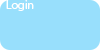
<style>
.page{position:relative;width:100px;height:50px;background:#98dffc}
.page>*{position:absolute;margin:0}
.t1{font:12px "MyriadPro-Regular";color:#ffffff}
</style>
<div class="page">
<p class="t1" style="left:6px;top:0px;width:28px;height:11px">Login</p>
</div>
